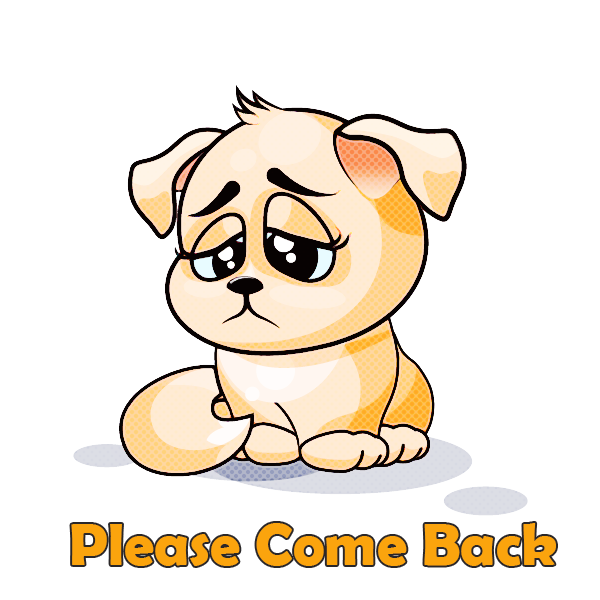
<style>
.page{position:relative;width:600px;height:600px;background:#ffffff}
.page>*{position:absolute;margin:0}
.t1{font:60px "BerlinSansFBDemi-Bold";color:#fba40d}
</style>
<div class="page">
<p class="t1" style="left:71px;top:523px;width:485px;height:43px">Please Come Back</p>
</div>
